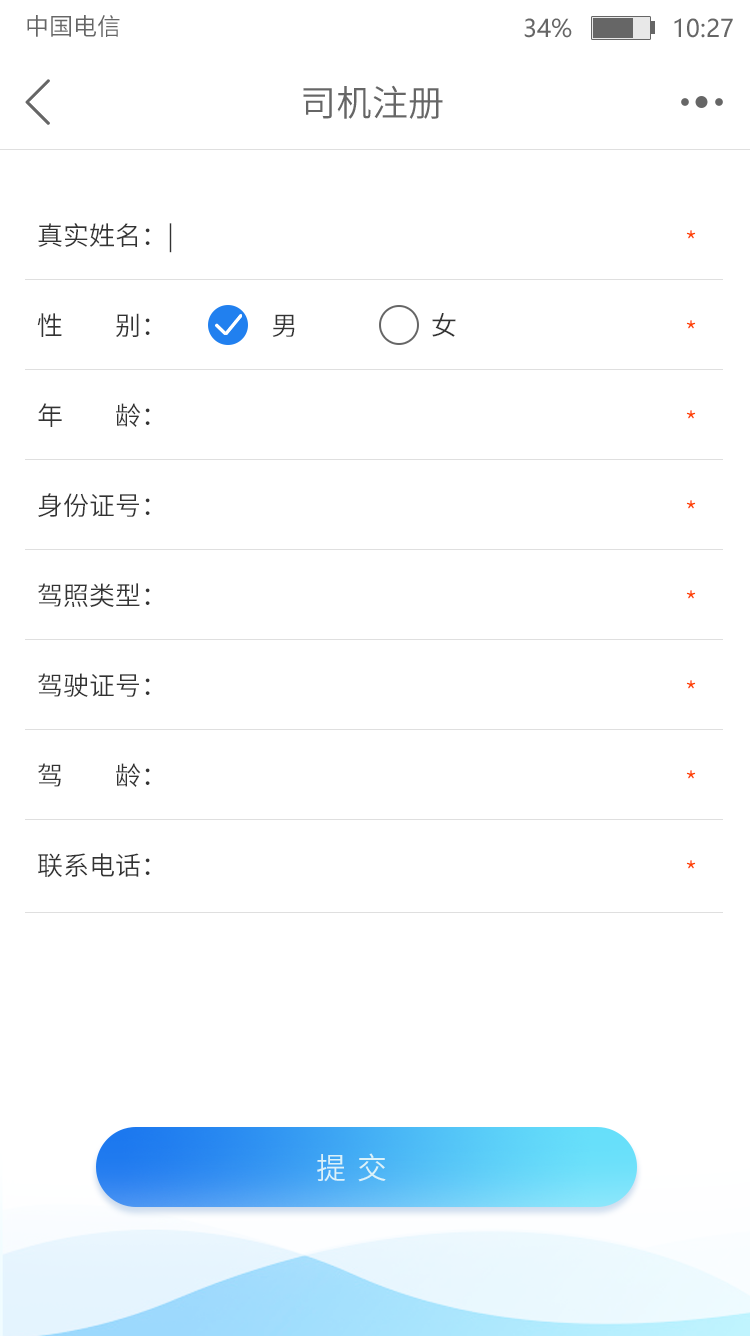
<style>
.page{position:relative;width:750px;height:1336px;background:#ffffff}
.page>*{position:absolute;margin:0}
.t1{font:24px "SourceHanSansCN-Normal";color:#666666}
.t2{font:24px "MicrosoftYaHei";color:#666666}
.t3{font:36px "SourceHanSansCN-Normal";color:#666666}
.t4{font:26px/90px "SourceHanSansCN-Normal";color:#333333}
.t5{font:26px/90px "SourceHanSansCN-Normal";color:#ff4200}
.t6{font:30px "SourceHanSansCN-Normal";letter-spacing:-0.025em;color:#daf2f9}
</style>
<div class="page">
<p class="t1" style="left:27px;top:15px;width:93px;height:22px">中国电信</p>
<p class="t2" style="left:524px;top:18px;width:209px;height:20px">34%              10:27</p>
<p class="t3" style="left:303px;top:85px;width:140px;height:34px">司机注册</p>
<p class="t4" style="left:37px;top:223px;width:419px;height:655px">真实姓名：|<br>性         别：                  男                       女<br>年         龄：<br>身份证号：<br>驾照类型：<br>驾驶证号：<br>驾         龄：<br>联系电话：</p>
<p class="t5" style="left:686px;top:230px;width:10px;height:639px">*<br>*<br>*<br>*<br>*<br>*<br>*<br>*</p>
<p class="t6" style="left:317px;top:1153px;width:69px;height:29px">提  交</p>
</div>
